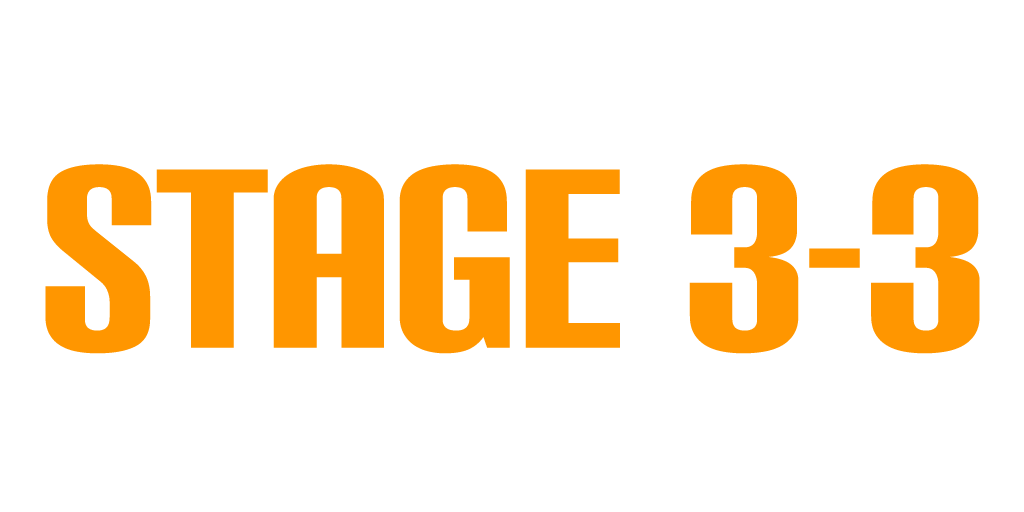
<style>
.page{position:relative;width:1024px;height:512px;background:#ffffff}
.page>*{position:absolute;margin:0}
.t1{font:250px "CarbonBl-Regular";color:#ff9600}
</style>
<div class="page">
<p class="t1" style="left:45px;top:164px;width:935px;height:190px">STAGE 3-3</p>
</div>
